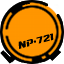
<style>
.page{position:relative;width:64px;height:64px;background:#ff9500}
.page>*{position:absolute;margin:0}
.t1{font:12px "Osaka-SansSerif";color:#000000}
</style>
<div class="page">
<p class="t1" style="left:18px;top:33px;width:36px;height:16px;rotate:-15deg">NP-721</p>
</div>
